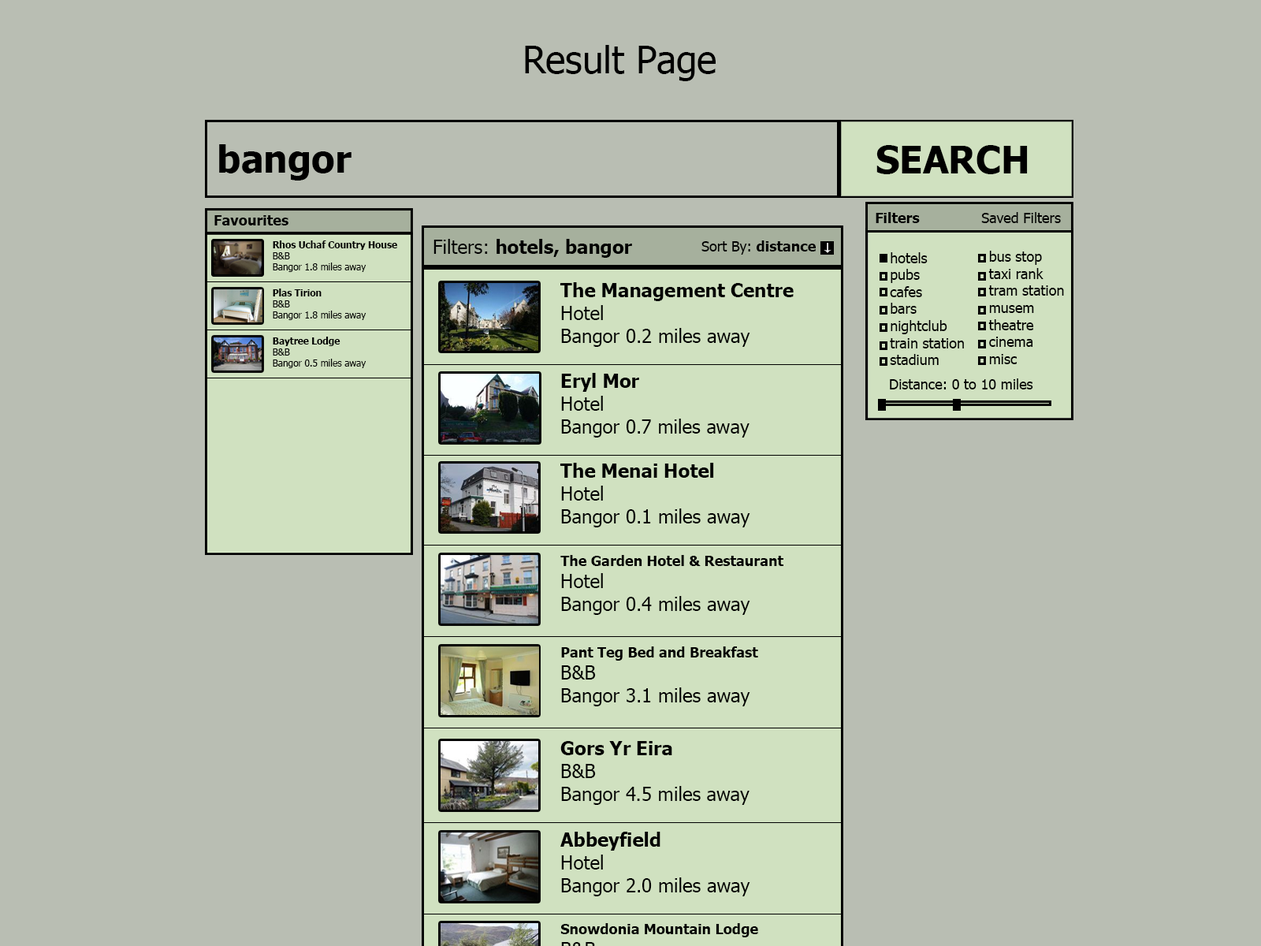
<style>
.page{position:relative;width:1261px;height:946px;background:#b9beb3}
.page>*{position:absolute;margin:0}
.t1{font:37.8px "Tahoma";color:#000000}
.t2{font:37.8px "Tahoma-Bold";color:#000000}
.t3{font:14.1px "Tahoma-Bold";color:#000000}
.t4{font:14.2px "Tahoma-Bold";color:#000000}
.t5{font:14.2px "Tahoma";color:#000000}
.t6{font:9.3px "Tahoma";color:#000000}
.t7{font:9.3px "Tahoma-Bold";color:#000000}
.t8{font:18.9px "Tahoma-Bold";color:#000000}
.t9{font:18.9px "Tahoma";color:#000000}
</style>
<div class="page">
<p class="t1" style="left:525px;top:45px;width:191px;height:36px">Result Page</p>
<p class="t2" style="left:219px;top:144px;width:132px;height:36px">bangor</p>
<p class="t2" style="left:876px;top:145px;width:152px;height:29px">SEARCH</p>
<p class="t3" style="left:214px;top:215px;width:74px;height:10px">Favourites</p>
<p class="t4" style="left:876px;top:212px;width:44px;height:11px">Filters</p>
<p class="t5" style="left:981px;top:212px;width:80px;height:11px">Saved Filters</p>
<p class="t6" style="left:273px;top:240px;width:124px;height:32px;text-align:right"><span class="t7">Rhos Uchaf Country House<br></span>B&amp;B<br>Bangor 1.8 miles away</p>
<p class="t8" style="left:433px;top:239px;width:199px;height:19px"><span class="t9">Filters: </span>hotels, bangor</p>
<p class="t5" style="left:701px;top:240px;width:115px;height:15px">Sort By: <span class="t4">distance</span></p>
<p class="t5" style="left:890px;top:252px;width:74px;height:113px;text-align:right">hotels<br>pubs<br>cafes<br>bars<br>nightclub<br>train station<br>stadium</p>
<p class="t5" style="left:988px;top:251px;width:76px;height:113px;text-align:right">bus stop<br>taxi rank<br>tram station<br>musem<br>theatre<br>cinema<br>misc</p>
<p class="t6" style="left:273px;top:288px;width:93px;height:32px;text-align:right"><span class="t7">Plas Tirion<br></span>B&amp;B<br>Bangor 1.8 miles away</p>
<p class="t9" style="left:560px;top:282px;width:234px;height:65px;text-align:right"><span class="t8">The Management Centre<br></span>Hotel<br>Bangor 0.2 miles away</p>
<p class="t6" style="left:273px;top:337px;width:93px;height:31px;text-align:right"><span class="t7">Baytree Lodge<br></span>B&amp;B<br>Bangor 0.5 miles away</p>
<p class="t9" style="left:561px;top:373px;width:188px;height:64px;text-align:right"><span class="t8">Eryl Mor<br></span>Hotel<br>Bangor 0.7 miles away</p>
<p class="t5" style="left:890px;top:378px;width:143px;height:11px">Distance: 0 to 10 miles</p>
<p class="t9" style="left:560px;top:463px;width:190px;height:64px;text-align:right"><span class="t8">The Menai Hotel<br></span>Hotel<br>Bangor 0.1 miles away</p>
<p class="t4" style="left:560px;top:555px;width:223px;height:60px;text-align:right">The Garden Hotel &amp; Restaurant<br><span class="t9">Hotel<br>Bangor 0.4 miles away</span></p>
<p class="t4" style="left:561px;top:646px;width:197px;height:60px;text-align:right">Pant Teg Bed and Breakfast<br><span class="t9">B&amp;B<br>Bangor 3.1 miles away</span></p>
<p class="t9" style="left:560px;top:741px;width:189px;height:64px;text-align:right"><span class="t8">Gors Yr Eira<br></span>B&amp;B<br>Bangor 4.5 miles away</p>
<p class="t9" style="left:560px;top:831px;width:190px;height:65px;text-align:right"><span class="t8">Abbeyfield<br></span>Hotel<br>Bangor 2.0 miles away</p>
</div>
